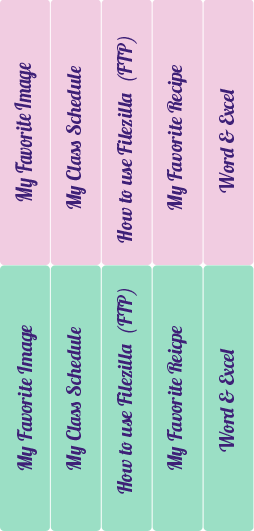
<style>
.page{position:relative;width:254px;height:531px;background:#9bdfc5}
.page>*{position:absolute;margin:0}
.t1{font:21px/23px "TimesNewRomanPS-ItalicMT";color:#ffffff}
.t2{font:20px/35.9px "Lobster1.3";color:#3e2077}
.t3{font:35.9px/35.9px "TimesNewRomanPS-BoldItalicMT";color:#ffffff}
.t4{font:33.9px/23px "TimesNewRomanPS-BoldItalicMT";color:#ffffff}
.t5{font:22.3px "Lobster1.3";color:#3e2077;scale:0.85 1}
.t6{font:20px "Lobster1.3";color:#3e2077}
</style>
<div class="page">
<p class="t1" style="left:117px;top:37px;width:20px;height:206px;rotate:-90deg"><span class="t2">How to use Filezilla  (FTP)<br></span><span class="t3"><br><br> right IT partner<br>is complicated!<br></span><span class="t4"><br><br>Service<br></span>sit amet, consectetur adipisicing elit, sed do eiusmod tempor incididunt ut labore dolore <br>magna aliqua. <br>Ut enim ad minim veniam, quis nostrud exercitation ullamco laboris nisi ut aliquip ex ea commodo consequat. Duis aute irure dolor in reprehenderit in voluptate velit esse cillum dolore eu fugiat nulla pariatur. Excepteur sint occaecat cupidatat non proident, sunt in culpa qui officia deserunt mollit anim id est laborum</p>
<p class="t5" style="left:14px;top:62px;width:24px;height:140px;rotate:-90deg">My Favorite Image</p>
<p class="t1" style="left:167px;top:65px;width:20px;height:145px;rotate:-90deg"><span class="t2">My Favorite Recipe <br></span><span class="t3"><br><br> right IT partner<br>is complicated!<br></span><span class="t4"><br><br>Service<br></span>sit amet, consectetur adipisicing elit, sed do eiusmod tempor incididunt ut labore dolore <br>magna aliqua. <br>Ut enim ad minim veniam, quis nostrud exercitation ullamco laboris nisi ut aliquip ex ea commodo consequat. Duis aute irure dolor in reprehenderit in voluptate velit esse cillum dolore eu fugiat nulla pariatur. Excepteur sint occaecat cupidatat non proident, sunt in culpa qui officia deserunt mollit anim id est laborum</p>
<p class="t1" style="left:66px;top:66px;width:20px;height:143px;rotate:-90deg"><span class="t2">My Class Schedule<br></span><span class="t3"><br><br> right IT partner<br>is complicated!<br></span><span class="t4"><br><br>Service<br></span>sit amet, consectetur adipisicing elit, sed do eiusmod tempor incididunt ut labore dolore <br>magna aliqua. <br>Ut enim ad minim veniam, quis nostrud exercitation ullamco laboris nisi ut aliquip ex ea commodo consequat. Duis aute irure dolor in reprehenderit in voluptate velit esse cillum dolore eu fugiat nulla pariatur. Excepteur sint occaecat cupidatat non proident, sunt in culpa qui officia deserunt mollit anim id est laborum</p>
<p class="t1" style="left:219px;top:88px;width:15px;height:105px;rotate:-90deg"><span class="t2">Word &amp; Excel<br></span><span class="t3"><br><br> right IT partner<br>is complicated!<br></span><span class="t4"><br><br>Service<br></span>sit amet, consectetur adipisicing elit, sed do eiusmod tempor incididunt ut labore dolore <br>magna aliqua. <br>Ut enim ad minim veniam, quis nostrud exercitation ullamco laboris nisi ut aliquip ex ea commodo consequat. Duis aute irure dolor in reprehenderit in voluptate velit esse cillum dolore eu fugiat nulla pariatur. Excepteur sint occaecat cupidatat non proident, sunt in culpa qui officia deserunt mollit anim id est laborum</p>
<p class="t1" style="left:117px;top:289px;width:20px;height:205px;rotate:-90deg"><span class="t2">How to use Filezilla  (FTP)<br></span><span class="t3"><br><br> right IT partner<br>is complicated!<br></span><span class="t4"><br><br>Service<br></span>sit amet, consectetur adipisicing elit, sed do eiusmod tempor incididunt ut labore dolore <br>magna aliqua. <br>Ut enim ad minim veniam, quis nostrud exercitation ullamco laboris nisi ut aliquip ex ea commodo consequat. Duis aute irure dolor in reprehenderit in voluptate velit esse cillum dolore eu fugiat nulla pariatur. Excepteur sint occaecat cupidatat non proident, sunt in culpa qui officia deserunt mollit anim id est laborum</p>
<p class="t6" style="left:17px;top:325px;width:20px;height:146px;rotate:-90deg">My Favorite Image</p>
<p class="t1" style="left:66px;top:327px;width:20px;height:143px;rotate:-90deg"><span class="t2">My Class Schedule<br><br></span><span class="t3"><br> right IT partner<br>is complicated!<br></span><span class="t4"><br><br>Service<br></span>sit amet, consectetur adipisicing elit, sed do eiusmod tempor incididunt ut labore dolore <br>magna aliqua. <br>Ut enim ad minim veniam, quis nostrud exercitation ullamco laboris nisi ut aliquip ex ea commodo consequat. Duis aute irure dolor in reprehenderit in voluptate velit esse cillum dolore eu fugiat nulla pariatur. Excepteur sint occaecat cupidatat non proident, sunt in culpa qui officia deserunt mollit anim id est laborum</p>
<p class="t1" style="left:167px;top:326px;width:20px;height:144px;rotate:-90deg"><span class="t2">My Favorite Reicpe<br></span><span class="t3"><br><br> right IT partner<br>is complicated!<br></span><span class="t4"><br><br>Service<br></span>sit amet, consectetur adipisicing elit, sed do eiusmod tempor incididunt ut labore dolore <br>magna aliqua. <br>Ut enim ad minim veniam, quis nostrud exercitation ullamco laboris nisi ut aliquip ex ea commodo consequat. Duis aute irure dolor in reprehenderit in voluptate velit esse cillum dolore eu fugiat nulla pariatur. Excepteur sint occaecat cupidatat non proident, sunt in culpa qui officia deserunt mollit anim id est laborum</p>
<p class="t1" style="left:219px;top:348px;width:15px;height:104px;rotate:-90deg"><span class="t2">Word &amp; Excel<br></span><span class="t3"><br><br> right IT partner<br>is complicated!<br></span><span class="t4"><br><br>Service<br></span>sit amet, consectetur adipisicing elit, sed do eiusmod tempor incididunt ut labore dolore <br>magna aliqua. <br>Ut enim ad minim veniam, quis nostrud exercitation ullamco laboris nisi ut aliquip ex ea commodo consequat. Duis aute irure dolor in reprehenderit in voluptate velit esse cillum dolore eu fugiat nulla pariatur. Excepteur sint occaecat cupidatat non proident, sunt in culpa qui officia deserunt mollit anim id est laborum</p>
</div>
